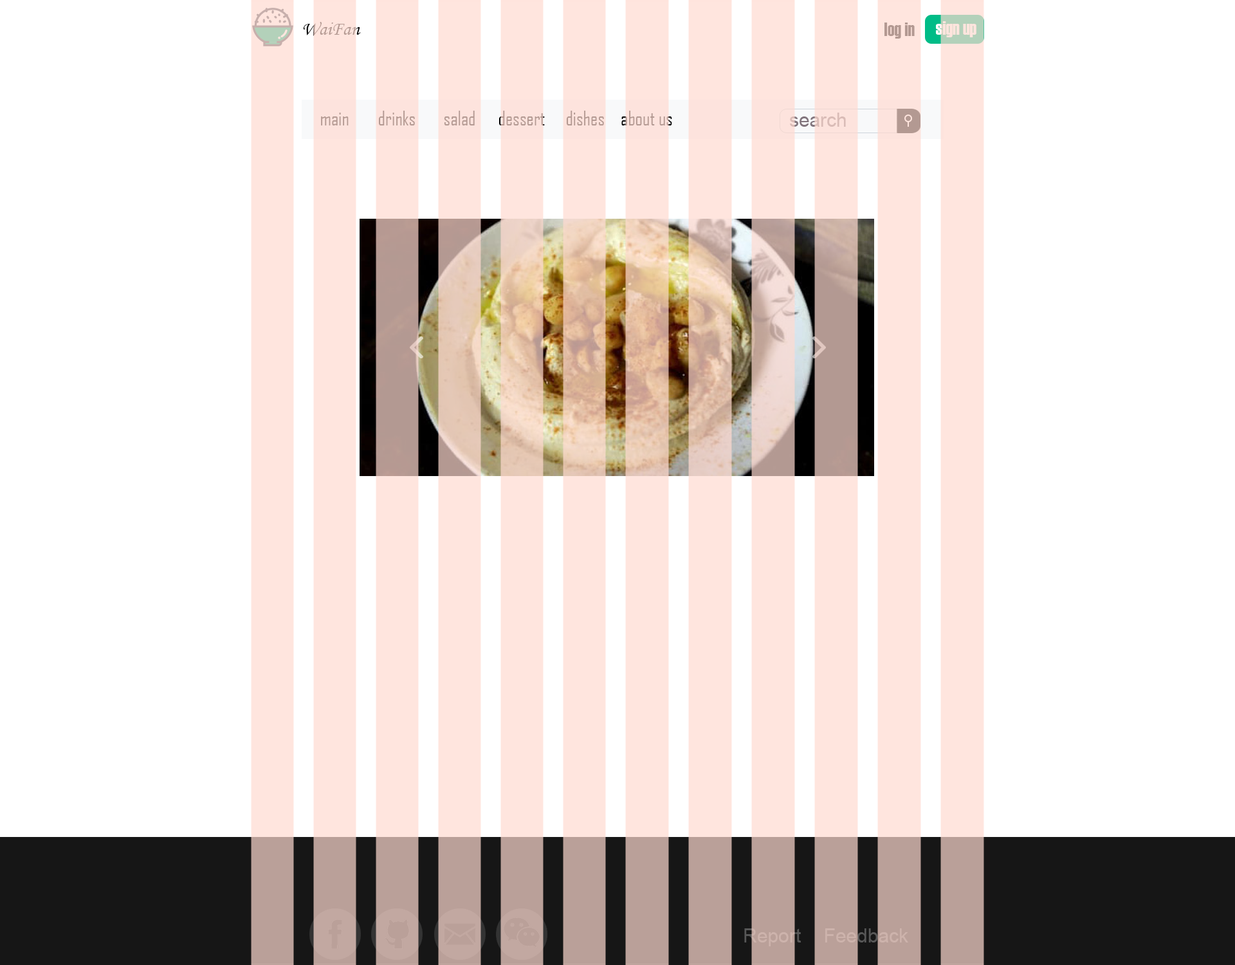
<style>
.page{position:relative;width:1235px;height:965px;background:#ffffff}
.page>*{position:absolute;margin:0}
.t1{font:19.3px "MonotypeCorsiva";color:#b39992}
.t2{font:19.3px "Haettenschweiler";color:#b39992}
.t3{font:19.3px "Haettenschweiler";color:#ffe5de}
.t4{font:19.3px "AgencyFB-Reg";color:#b39992}
</style>
<div class="page">
<p class="t1" style="left:303px;top:22px;width:58px;height:14px">WaiFan</p>
<p class="t2" style="left:885px;top:23px;width:30px;height:16px">log in</p>
<p class="t3" style="left:936px;top:21px;width:41px;height:16px">sign up</p>
<p class="t4" style="left:321px;top:113px;width:28px;height:12px">main</p>
<p class="t4" style="left:378px;top:111px;width:37px;height:14px">drinks</p>
<p class="t4" style="left:444px;top:111px;width:31px;height:14px">salad</p>
<p class="t4" style="left:499px;top:111px;width:46px;height:14px">dessert</p>
<p class="t4" style="left:566px;top:111px;width:38px;height:14px">dishes</p>
<p class="t4" style="left:622px;top:111px;width:50px;height:14px">about us</p>
</div>
